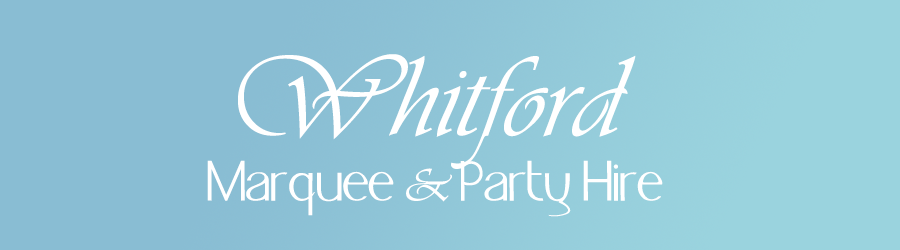
<style>
.page{position:relative;width:900px;height:250px;background:#89bdd3}
.page>*{position:absolute;margin:0}
.t1{font:120px "Vivaldii";color:#ffffff}
.t2{font:48px "JacksFont";color:#ffffff}
.t3{font:48px "Vivaldii";color:#ffffff}
</style>
<div class="page">
<p class="t1" style="left:238px;top:54px;width:398px;height:115px">Whitford</p>
<p class="t2" style="left:207px;top:160px;width:456px;height:57px">Marquee <span class="t3">&amp;</span> Party Hire</p>
</div>
